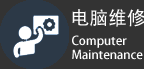
<style>
.page{position:relative;width:144px;height:69px;background:#333333}
.page>*{position:absolute;margin:0}
.t1{font:18.9px "AdobeHeitiStd-Regular";color:#fefefe}
.t2{font:12px/14px "AdobeHeitiStd-Regular";color:#fefefe}
</style>
<div class="page">
<p class="t1" style="left:72px;top:9px;width:73px;height:18px">电脑维修</p>
<p class="t2" style="left:72px;top:35px;width:71px;height:25px">Computer<br>Maintenance</p>
</div>
